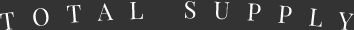
<style>
.page{position:relative;width:354px;height:30px;background:#333333}
.page>*{position:absolute;margin:0}
.t1{font:24px "PlayfairDisplay-Regular";letter-spacing:0.7em;color:#ffffff;text-transform:uppercase}
</style>
<div class="page">
<p class="t1" style="left:0px;top:1px;width:354px;height:30px">total supply</p>
</div>
